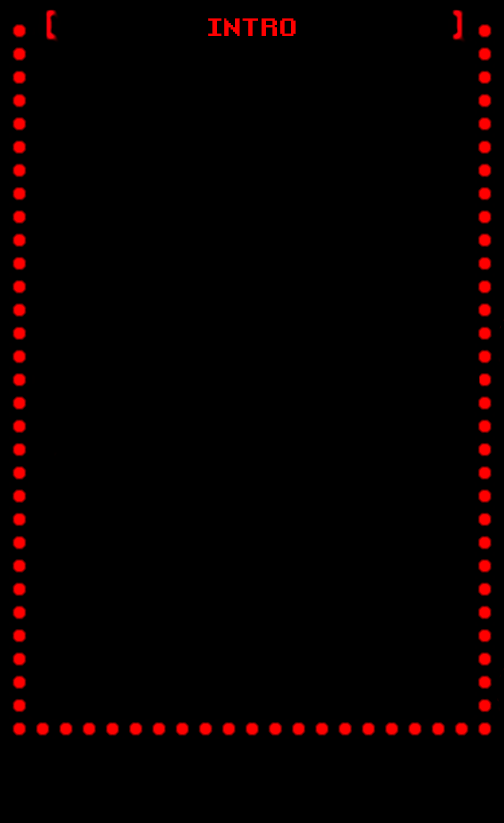
<style>
.page{position:relative;width:504px;height:823px;background:#000000}
.page>*{position:absolute;margin:0}
.t1{font:24px "RetroGaming";color:#ff0101}
</style>
<div class="page">
<p class="t1" style="left:208px;top:18px;width:88px;height:18px">INTRO</p>
</div>
